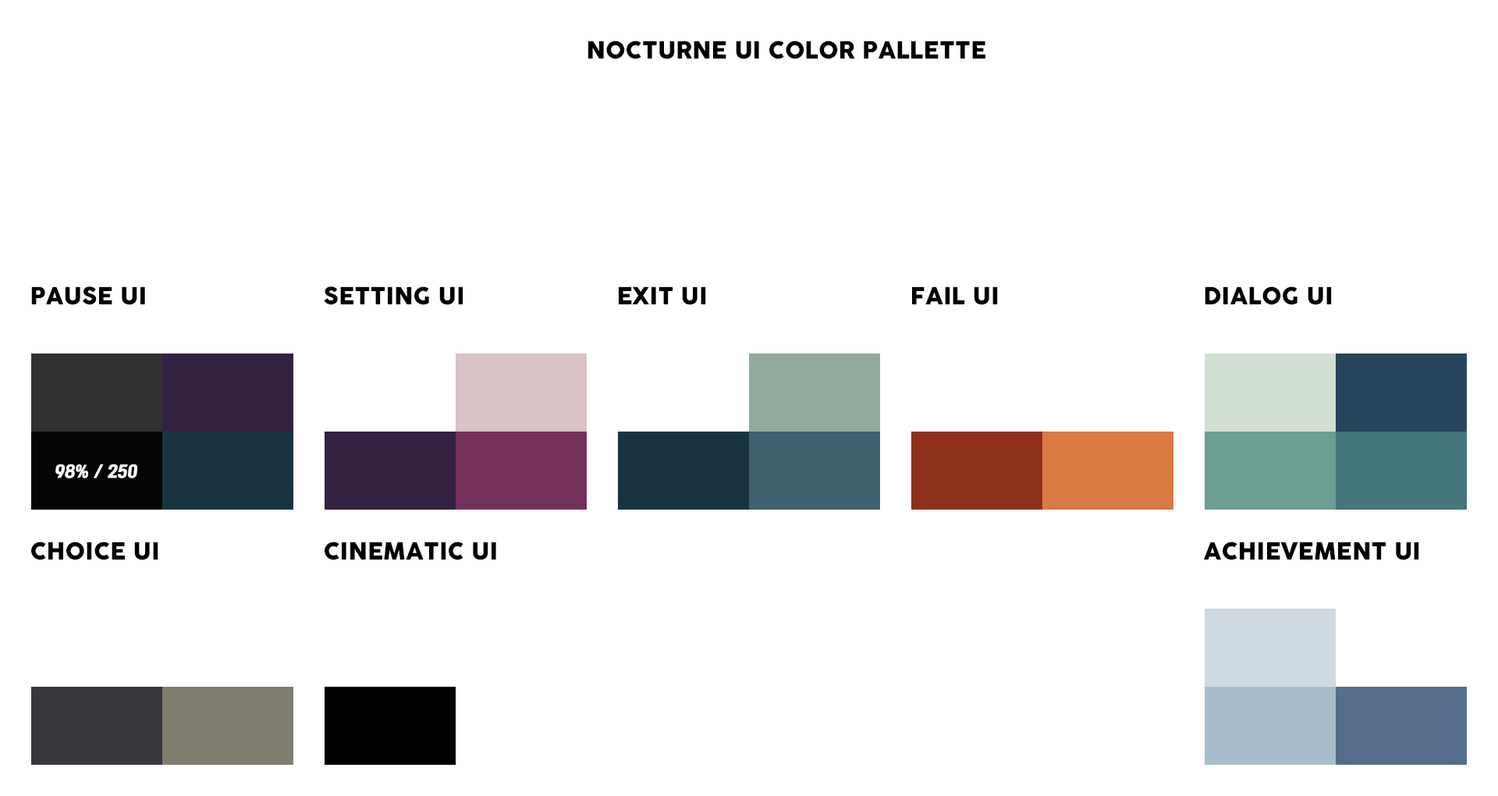
<style>
.page{position:relative;width:1498px;height:796px;background:#ffffff}
.page>*{position:absolute;margin:0}
.t1{font:23.4px "Cocogoose";color:#000000}
.t2{font:15.6px "KoreanRKT-R";color:#ffffff}
</style>
<div class="page">
<p class="t1" style="left:588px;top:41px;width:398px;height:18px">NOCTURNE UI COLOR PALLETTE</p>
<p class="t1" style="left:31px;top:286px;width:114px;height:19px">PAUSE UI</p>
<p class="t1" style="left:324px;top:286px;width:140px;height:19px">SETTING UI</p>
<p class="t1" style="left:619px;top:286px;width:87px;height:19px">EXIT UI</p>
<p class="t1" style="left:912px;top:286px;width:86px;height:19px">FAIL UI</p>
<p class="t1" style="left:1205px;top:286px;width:127px;height:19px">DIALOG UI</p>
<p class="t2" style="left:55px;top:464px;width:82px;height:14px">98% / 250</p>
<p class="t1" style="left:31px;top:542px;width:127px;height:18px">CHOICE UI</p>
<p class="t1" style="left:325px;top:542px;width:171px;height:18px">CINEMATIC UI</p>
<p class="t1" style="left:1204px;top:542px;width:215px;height:18px">ACHIEVEMENT UI</p>
</div>
